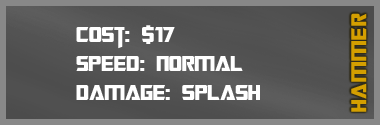
<style>
.page{position:relative;width:380px;height:125px}
.page>*{position:absolute;margin:0}
.t1{font:24px "TransformersMovie";letter-spacing:0.04em;color:#d49f00}
.t2{font:24px "TransformersMovie";color:#ffffff}
.t3{font:24px "TransformersMovie";letter-spacing:0.04em;color:#ffffff}
</style>
<div class="page">
<p class="t1" style="left:351px;top:13px;width:16px;height:99px;rotate:-90deg">hammer</p>
<p class="t2" style="left:76px;top:25px;width:184px;height:75px">Cost: $17<br>Spee<span class="t3">d</span>: normal<br>Damage: splash</p>
</div>
